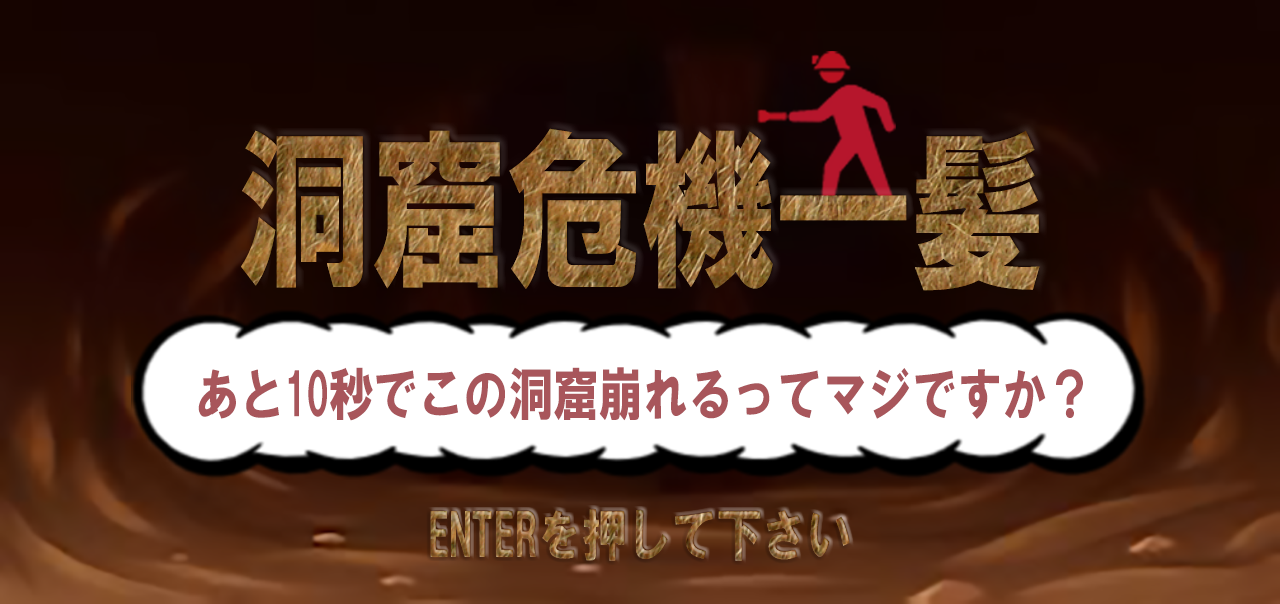
<style>
.page{position:relative;width:1280px;height:604px}
.page>*{position:absolute;margin:0}
.t1{font:172.8px "HGSoeiKakugothicUB";letter-spacing:-0.025em;font-variant:small-caps;scale:0.8 1}
.t2{font:57.6px "HGSoeiKakugothicUB";letter-spacing:-0.025em;color:#a8565b;font-variant:small-caps;scale:0.8 1}
.t3{font:57.6px "HGSoeiKakugothicUB";letter-spacing:-0.025em;font-variant:small-caps;scale:0.8 1}
</style>
<div class="page">
<p class="t1" style="left:241px;top:128px;width:799px;height:163px">洞窟危機一髪</p>
<p class="t2" style="left:198px;top:367px;width:885px;height:54px">あと10秒でこの洞窟崩れるってマジですか？</p>
<p class="t3" style="left:430px;top:509px;width:420px;height:52px">ENTERを押して下さい</p>
</div>
